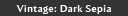
<style>
.page{position:relative;width:128px;height:16px;background:#333333}
.page>*{position:absolute;margin:0}
.t1{font:10px "AmiraParadiso";letter-spacing:0.05em;color:#ffffff}
</style>
<div class="page">
<p class="t1" style="left:16px;top:5px;width:95px;height:9px">Vintage: Dark Sepia</p>
</div>
